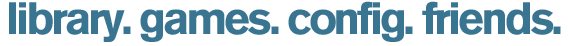
<style>
.page{position:relative;width:568px;height:46px;background:#ffffff}
.page>*{position:absolute;margin:0}
.t1{font:44.7px "AkzidenzGrotesk-Black";letter-spacing:-0.075em;color:#397491}
</style>
<div class="page">
<p class="t1" style="left:9px;top:1px;width:552px;height:41px">library. games. config. friends.</p>
</div>
